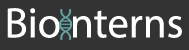
<style>
.page{position:relative;width:189px;height:50px;background:#333333}
.page>*{position:absolute;margin:0}
.t1{font:42.9px "MyriadPro-Regular";color:#ffffff}
</style>
<div class="page">
<p class="t1" style="left:7px;top:8px;width:175px;height:30px">Bio nterns</p>
</div>
